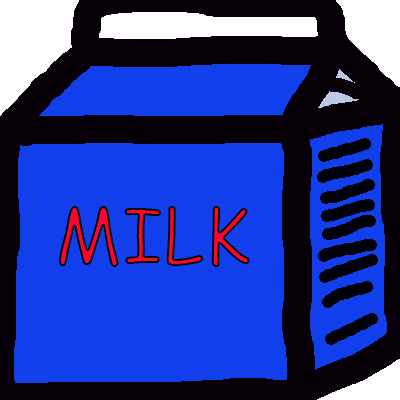
<style>
.page{position:relative;width:400px;height:400px;background:#113fec}
.page>*{position:absolute;margin:0}
.t1{font:75.1px "ComicSansMS"}
</style>
<div class="page">
<p class="t1" style="left:59px;top:206px;width:191px;height:61px">MILK</p>
</div>
